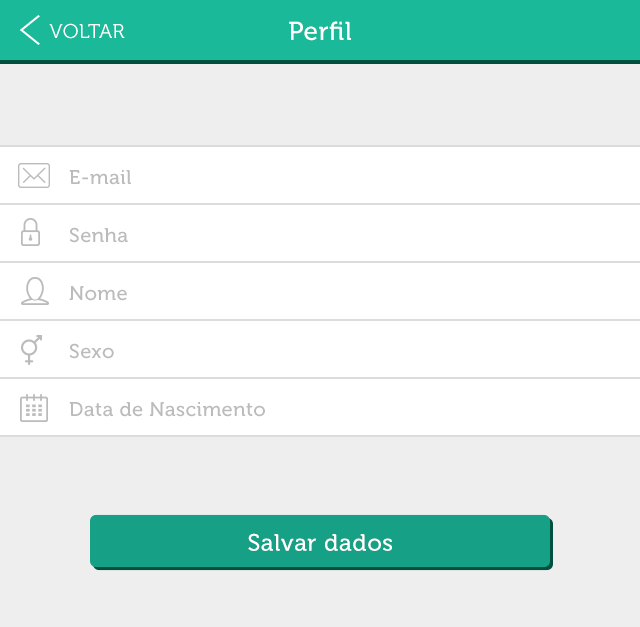
<style>
.page{position:relative;width:640px;height:627px;background:#ffffff}
.page>*{position:absolute;margin:0}
.t1{font:20px "Museo300-Regular";letter-spacing:0.02em;color:#ffffff;text-transform:uppercase}
.t2{font:26px "Museo500-Regular";letter-spacing:0.02em;color:#ffffff}
.t3{font:20px "Museo500-Regular";letter-spacing:0.02em;color:#bbbbbb}
.t4{font:23.8px "Museo500-Regular";letter-spacing:0.02em;color:#ffffff}
</style>
<div class="page">
<p class="t1" style="left:49px;top:23px;width:76px;height:16px">Voltar</p>
<p class="t2" style="left:289px;top:21px;width:62px;height:20px">Perfil</p>
<p class="t3" style="left:69px;top:170px;width:62px;height:15px">E-mail</p>
<p class="t3" style="left:69px;top:227px;width:59px;height:16px">Senha</p>
<p class="t3" style="left:69px;top:286px;width:58px;height:15px">Nome</p>
<p class="t3" style="left:69px;top:343px;width:45px;height:16px">Sexo</p>
<p class="t3" style="left:69px;top:402px;width:196px;height:15px">Data de Nascimento</p>
<p class="t4" style="left:248px;top:533px;width:144px;height:18px">Salvar dados</p>
</div>
